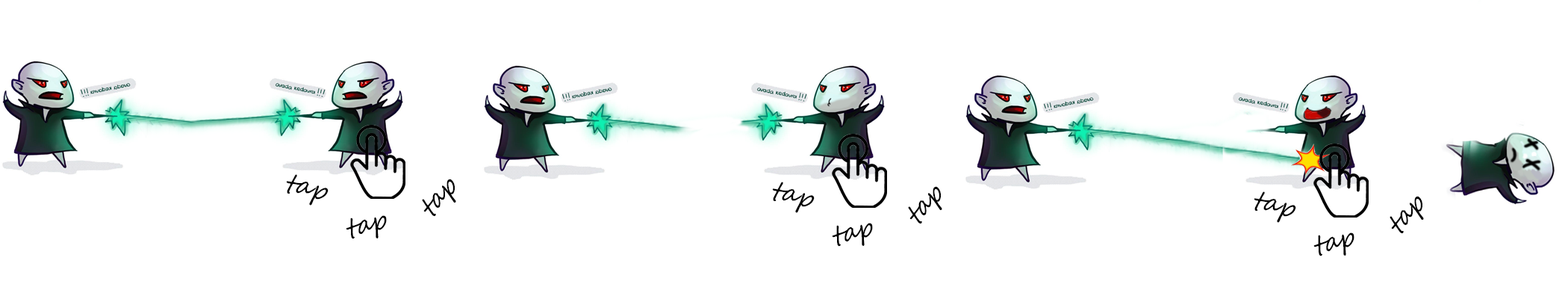
<style>
.page{position:relative;width:1568px;height:302px;background:#ffffff}
.page>*{position:absolute;margin:0}
.t1{font:26px "SegoeScript";color:#000000}
</style>
<div class="page">
<p class="t1" style="left:286px;top:174px;width:43px;height:31px;rotate:15deg">tap</p>
<p class="t1" style="left:422px;top:178px;width:34px;height:38px;rotate:-47deg">tap</p>
<p class="t1" style="left:772px;top:181px;width:43px;height:32px;rotate:15deg">tap</p>
<p class="t1" style="left:908px;top:186px;width:34px;height:37px;rotate:-47deg">tap</p>
<p class="t1" style="left:1254px;top:191px;width:42px;height:32px;rotate:15deg">tap</p>
<p class="t1" style="left:1390px;top:196px;width:34px;height:37px;rotate:-47deg">tap</p>
<p class="t1" style="left:346px;top:215px;width:41px;height:24px;rotate:-14deg">tap</p>
<p class="t1" style="left:832px;top:223px;width:41px;height:23px;rotate:-14deg">tap</p>
<p class="t1" style="left:1313px;top:232px;width:41px;height:24px;rotate:-14deg">tap</p>
</div>
